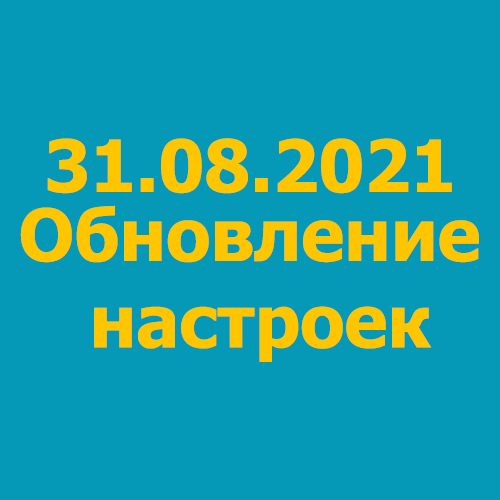
<style>
.page{position:relative;width:500px;height:500px;background:#0698b7}
.page>*{position:absolute;margin:0}
.t1{font:72px "Tahoma-Bold";color:#ffc600}
</style>
<div class="page">
<p class="t1" style="left:47px;top:138px;width:405px;height:56px">31.08.2021</p>
<p class="t1" style="left:20px;top:205px;width:459px;height:157px;text-align:center">Обновление <br>настроек</p>
</div>
